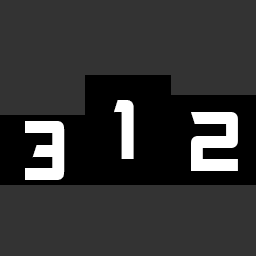
<style>
.page{position:relative;width:256px;height:256px;background:#333333}
.page>*{position:absolute;margin:0}
.t1{font:79.8px "Akashi";color:#ffffff}
</style>
<div class="page">
<p class="t1" style="left:114px;top:100px;width:20px;height:59px">1</p>
<p class="t1" style="left:191px;top:112px;width:47px;height:59px">2</p>
<p class="t1" style="left:25px;top:121px;width:40px;height:59px">3</p>
</div>
